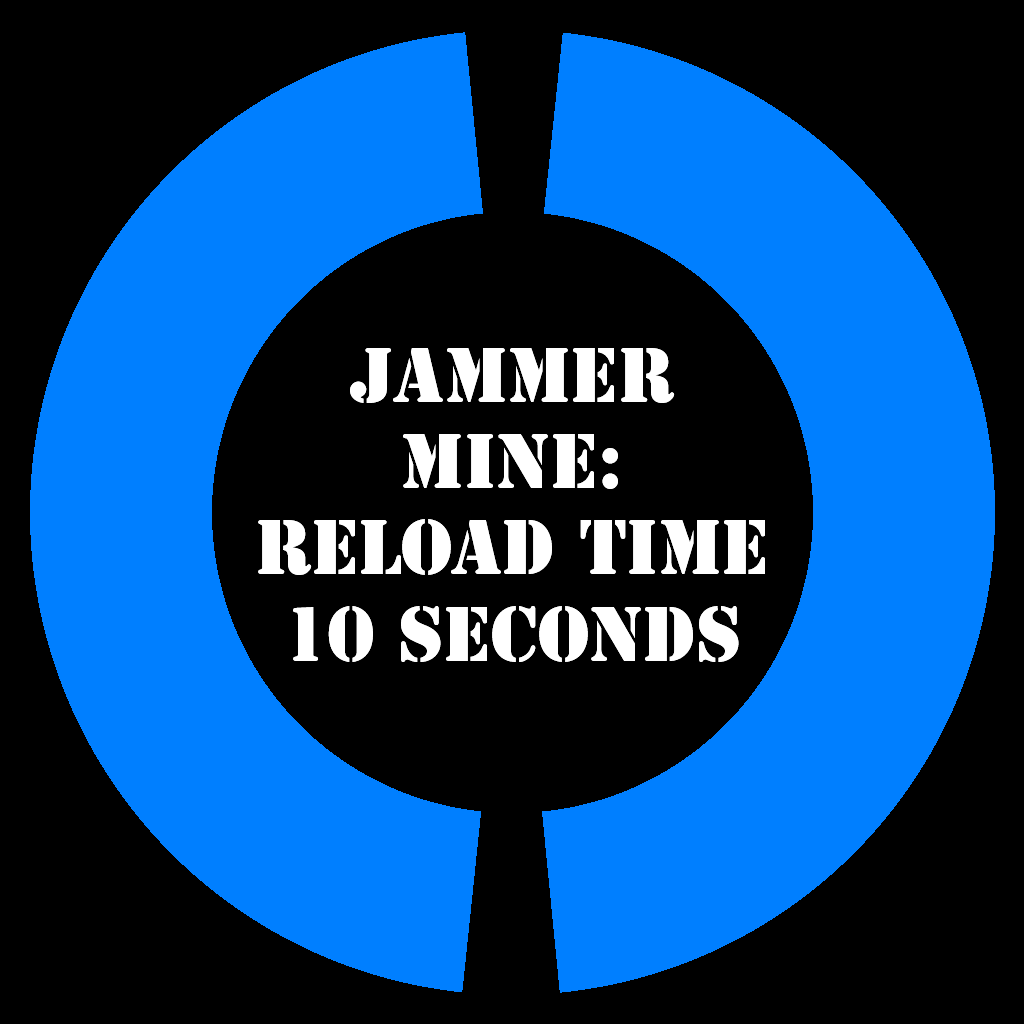
<style>
.page{position:relative;width:1024px;height:1024px;background:#000000}
.page>*{position:absolute;margin:0}
.t1{font:72px "StencilStd";color:#ffffff}
</style>
<div class="page">
<p class="t1" style="left:258px;top:348px;width:507px;height:314px;text-align:center">Jammer<br>Mine:<br>Reload time<br>10 Seconds</p>
</div>
